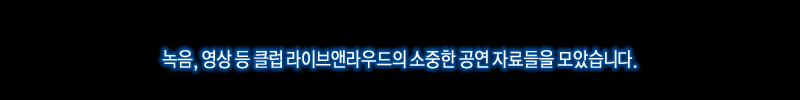
<style>
.page{position:relative;width:800px;height:100px;background:#000000}
.page>*{position:absolute;margin:0}
.t1{font:20px "YDI-WebG";color:#ffffff;font-weight:bold;scale:0.8 1}
</style>
<div class="page">
<p class="t1" style="left:162px;top:50px;width:475px;height:21px">녹음, 영상 등 클럽 라이브앤라우드의 소중한 공연 자료들을 모았습니다.</p>
</div>
